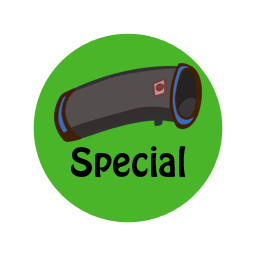
<style>
.page{position:relative;width:256px;height:256px;background:#ffffff}
.page>*{position:absolute;margin:0}
.t1{font:36px "HoboStd";color:#000000}
</style>
<div class="page">
<p class="t1" style="left:71px;top:146px;width:115px;height:31px">Special</p>
</div>
